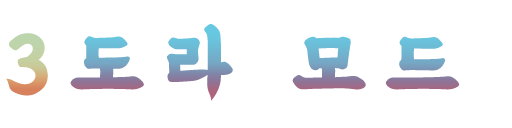
<style>
.page{position:relative;width:512px;height:128px;background:#ffffff}
.page>*{position:absolute;margin:0}
.t1{font:83.3px "BMEULJIROTTF";letter-spacing:0.22em}
</style>
<div class="page">
<p class="t1" style="left:70px;top:24px;width:390px;height:77px">도라 모드</p>
<p class="t1" style="left:6px;top:33px;width:42px;height:63px">3</p>
</div>
